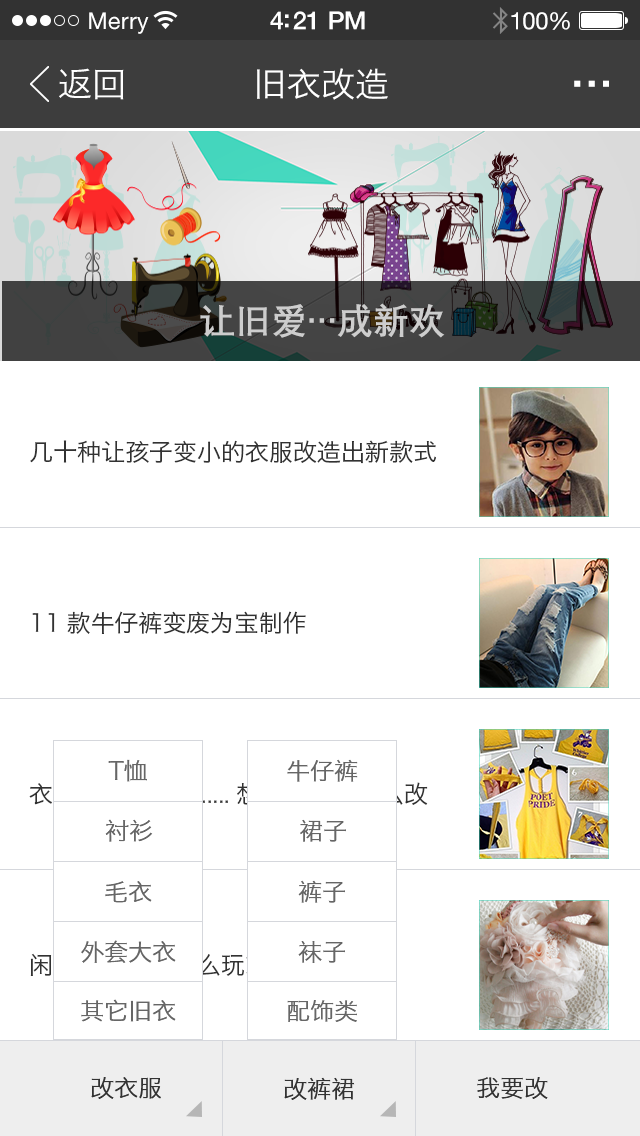
<style>
.page{position:relative;width:640px;height:1136px;background:#ffffff}
.page>*{position:absolute;margin:0}
.t1{font:34px "HiraginoSansGB-W3";color:#ffffff}
.t2{font:60px "HiraginoSansGB-W3";color:#ffffff}
.t3{font:36px "DengXian-Bold";color:#cdcdcd}
.t4{font:24px "HiraginoSansGB-W3";color:#323232}
.t5{font:24px "HiraginoSansGB-W3";color:#666666}
.t6{font:24px "HiraginoSansGB-W3";color:#ffffff}
.t7{font:24px "HiraginoSansGB-W3";color:#333333}
</style>
<div class="page">
<p class="t1" style="left:59px;top:68px;width:65px;height:32px">返回</p>
<p class="t1" style="left:257px;top:68px;width:131px;height:32px">旧衣改造</p>
<p class="t2" style="left:574px;top:80px;width:35px;height:7px">...</p>
<p class="t3" style="left:200px;top:303px;width:245px;height:35px">让旧爱…成新欢</p>
<p class="t4" style="left:30px;top:440px;width:406px;height:24px">几十种让孩子变小的衣服改造出新款式</p>
<p class="t4" style="left:32px;top:611px;width:274px;height:23px">11款牛仔裤变废为宝制作</p>
<p class="t5" style="left:108px;top:759px;width:39px;height:23px">T恤</p>
<p class="t5" style="left:287px;top:759px;width:71px;height:23px">牛仔裤</p>
<p class="t6" style="left:29px;top:782px;width:399px;height:23px">衣服改造旧.............想怎么改就怎么改</p>
<p class="t5" style="left:105px;top:819px;width:48px;height:23px">衬衫</p>
<p class="t5" style="left:300px;top:819px;width:46px;height:23px">裙子</p>
<p class="t5" style="left:105px;top:881px;width:47px;height:22px">毛衣</p>
<p class="t5" style="left:298px;top:880px;width:47px;height:23px">裤子</p>
<p class="t5" style="left:81px;top:940px;width:95px;height:23px">外套大衣</p>
<p class="t5" style="left:298px;top:941px;width:47px;height:22px">袜子</p>
<p class="t5" style="left:81px;top:999px;width:95px;height:23px">其它旧衣</p>
<p class="t5" style="left:287px;top:1000px;width:70px;height:22px">配饰类</p>
<p class="t7" style="left:91px;top:1077px;width:70px;height:22px">改衣服</p>
<p class="t7" style="left:284px;top:1077px;width:71px;height:23px">改裤裙</p>
<p class="t7" style="left:477px;top:1077px;width:71px;height:22px">我要改</p>
</div>
